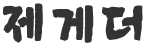
<style>
.page{position:relative;width:150px;height:50px;background:#ffffff}
.page>*{position:absolute;margin:0}
.t1{font:59.3px "JejuHallasan";letter-spacing:0.12em;color:#333333;font-weight:bold;scale:0.77 1}
</style>
<div class="page">
<p class="t1" style="left:3px;top:3px;width:140px;height:40px">제게더</p>
</div>
